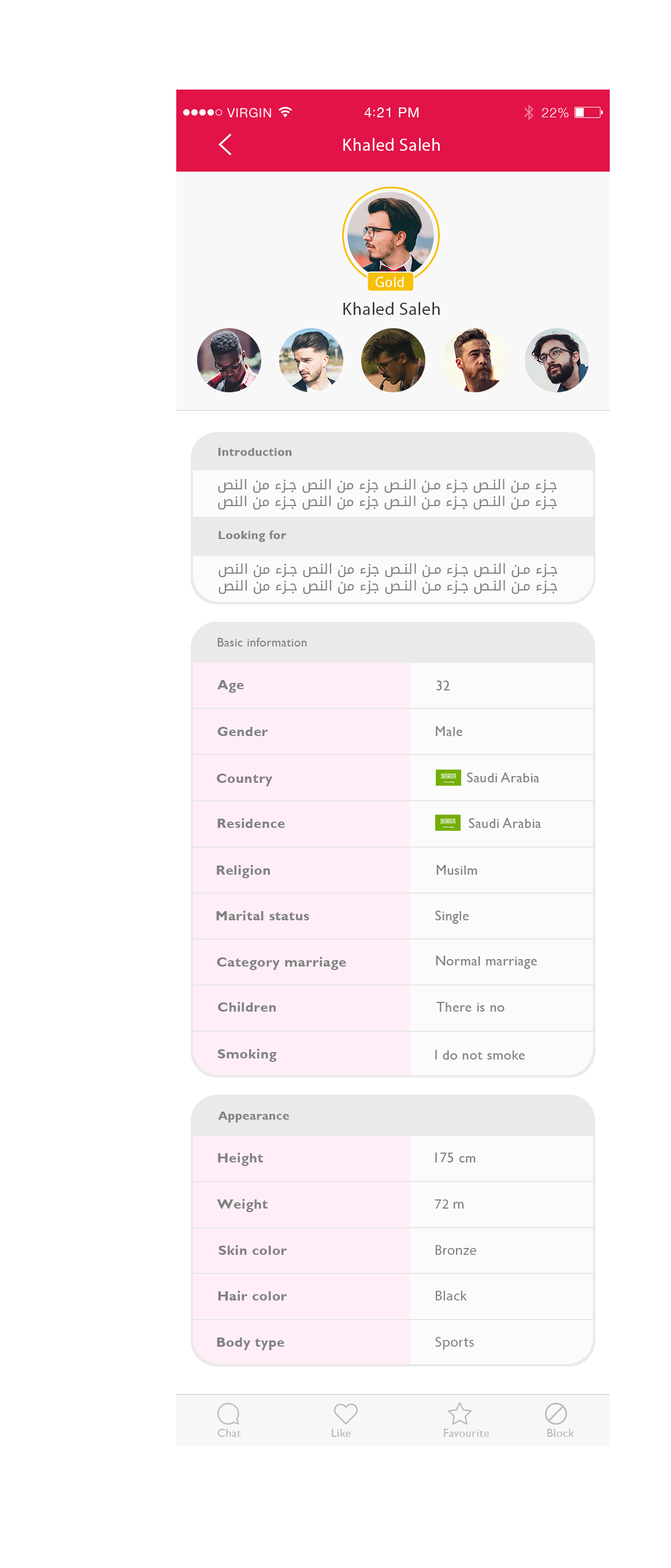
<style>
.page{position:relative;width:671px;height:1568px;background:#ffffff}
.page>*{position:absolute;margin:0}
.t1{font:17.3px "MyriadPro-Regular";letter-spacing:0.029em;color:#ffffff}
.t2{font:14.7px "MyriadPro-Regular";letter-spacing:0.029em;color:#ffffff;scale:0.96 1}
.t3{font:17.3px "MyriadPro-Regular";letter-spacing:0.029em;color:#353535}
.t4{font:12px "GillSans-Bold";letter-spacing:0.029em;color:#828282}
.t5{font:13.9px "DroidArabicKufi";letter-spacing:0.029em;color:#828282}
.t6{font:12px "GillSans";letter-spacing:0.029em;color:#828282}
.t7{font:13.9px "GillSans-Bold";letter-spacing:0.029em;color:#828282}
.t8{font:13.9px "GillSans";letter-spacing:0.029em;color:#828282}
.t9{font:13.9px "MyriadPro-Regular";letter-spacing:0.029em;color:#828282}
.t10{font:11.6px "GillSans";letter-spacing:0.029em;color:#b9b9b9}
</style>
<div class="page">
<p class="t1" style="left:343px;top:138px;width:97px;height:13px">Khaled Saleh</p>
<p class="t2" style="left:376px;top:277px;width:28px;height:10px">Gold</p>
<p class="t3" style="left:343px;top:302px;width:97px;height:13px">Khaled Saleh</p>
<p class="t4" style="left:218px;top:448px;width:74px;height:8px">Introduction</p>
<p class="t5" style="left:218px;top:479px;width:338px;height:31px;text-align:right">جزء من النص جزء من النص جزء من النص جزء من النص<br>جزء من النص جزء من النص جزء من النص جزء من النص</p>
<p class="t4" style="left:218px;top:530px;width:69px;height:12px">Looking for</p>
<p class="t5" style="left:218px;top:563px;width:339px;height:31px;text-align:right">جزء من النص جزء من النص جزء من النص جزء من النص<br>جزء من النص جزء من النص جزء من النص جزء من النص</p>
<p class="t6" style="left:217px;top:638px;width:90px;height:8px">Basic information</p>
<p class="t7" style="left:217px;top:680px;width:27px;height:13px">Age</p>
<p class="t8" style="left:436px;top:681px;width:13px;height:9px">32</p>
<p class="t7" style="left:217px;top:727px;width:51px;height:9px">Gender</p>
<p class="t8" style="left:436px;top:726px;width:26px;height:10px">Male</p>
<p class="t7" style="left:217px;top:774px;width:56px;height:12px">Country</p>
<p class="t8" style="left:467px;top:772px;width:72px;height:10px">Saudi Arabia</p>
<p class="t7" style="left:217px;top:818px;width:68px;height:10px">Residence</p>
<p class="t8" style="left:469px;top:818px;width:72px;height:10px">Saudi Arabia</p>
<p class="t7" style="left:217px;top:865px;width:53px;height:13px">Religion</p>
<p class="t8" style="left:436px;top:865px;width:41px;height:10px">Musilm</p>
<p class="t7" style="left:216px;top:911px;width:93px;height:9px">Marital status</p>
<p class="t8" style="left:435px;top:911px;width:34px;height:13px">Single</p>
<p class="t7" style="left:217px;top:957px;width:129px;height:13px">Category marriage</p>
<p class="t8" style="left:436px;top:956px;width:101px;height:13px">Normal marriage</p>
<p class="t7" style="left:218px;top:1002px;width:58px;height:10px">Children</p>
<p class="t8" style="left:436px;top:1002px;width:68px;height:10px">There is no</p>
<p class="t7" style="left:218px;top:1049px;width:59px;height:13px">Smoking</p>
<p class="t8" style="left:435px;top:1050px;width:90px;height:10px">I do not smoke</p>
<p class="t4" style="left:218px;top:1112px;width:71px;height:11px">Appearance</p>
<p class="t7" style="left:218px;top:1153px;width:45px;height:13px">Height</p>
<p class="t8" style="left:435px;top:1153px;width:40px;height:9px">175 cm</p>
<p class="t7" style="left:217px;top:1199px;width:50px;height:13px">Weight</p>
<p class="t8" style="left:434px;top:1199px;width:29px;height:10px">72 m</p>
<p class="t7" style="left:218px;top:1245px;width:69px;height:10px">Skin color</p>
<p class="t9" style="left:435px;top:1245px;width:41px;height:10px">Bronze</p>
<p class="t7" style="left:218px;top:1291px;width:69px;height:10px">Hair color</p>
<p class="t9" style="left:436px;top:1291px;width:31px;height:10px">Black</p>
<p class="t7" style="left:217px;top:1337px;width:67px;height:13px">Body type</p>
<p class="t9" style="left:435px;top:1337px;width:39px;height:13px">Sports</p>
<p class="t10" style="left:217px;top:1429px;width:24px;height:8px">Chat</p>
<p class="t10" style="left:332px;top:1429px;width:19px;height:8px">Like</p>
<p class="t10" style="left:444px;top:1429px;width:45px;height:8px">Favourite</p>
<p class="t10" style="left:547px;top:1429px;width:27px;height:8px">Block</p>
</div>
